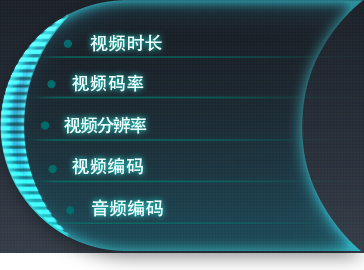
<style>
.page{position:relative;width:364px;height:270px}
.page>*{position:absolute;margin:0}
.t1{font:18.2px "AdobeHeitiStd-Regular";color:#ffffff}
.t2{font:18.2px "AdobeHeitiStd-Regular";letter-spacing:-0.1em;color:#ffffff}
</style>
<div class="page">
<p class="t1" style="left:90px;top:34px;width:72px;height:18px">视频时长</p>
<p class="t1" style="left:72px;top:74px;width:72px;height:18px">视频码率</p>
<p class="t2" style="left:64px;top:116px;width:83px;height:18px">视频分辨率</p>
<p class="t1" style="left:72px;top:157px;width:71px;height:18px">视频编码</p>
<p class="t1" style="left:92px;top:199px;width:71px;height:18px">音频编码</p>
</div>
